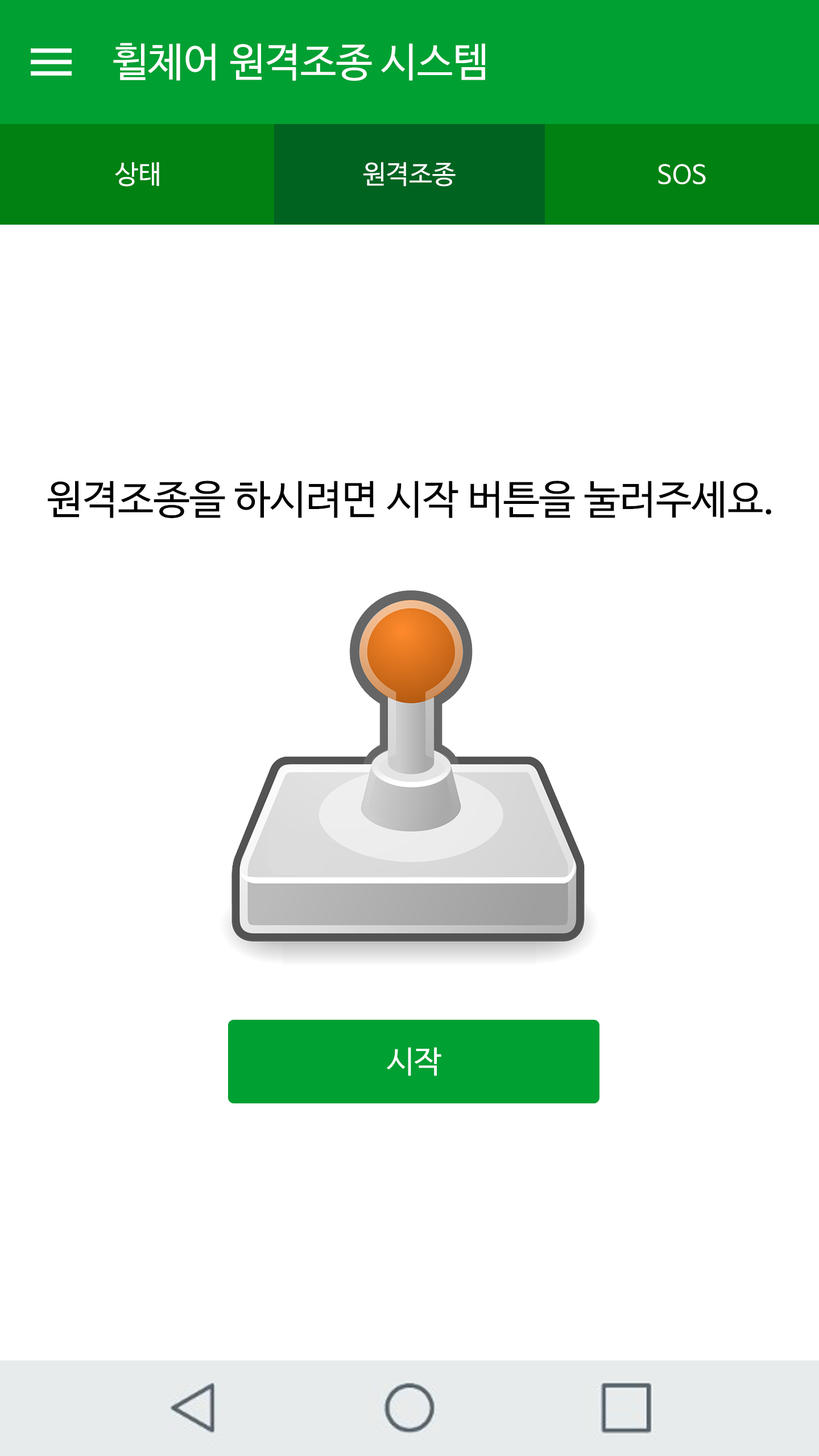
<style>
.page{position:relative;width:819px;height:1456px;background:#ffffff}
.page>*{position:absolute;margin:0}
.t1{font:40.3px "NanumBarunGothicOTF";color:#ffffff}
.t2{font:26.1px "NanumBarunGothicOTF";color:#ffffff}
.t3{font:40.3px "NanumBarunGothicOTF";color:#000000}
.t4{font:30.8px "NanumBarunGothicOTF";color:#ffffff}
</style>
<div class="page">
<p class="t1" style="left:113px;top:43px;width:372px;height:38px">휠체어 원격조종 시스템</p>
<p class="t2" style="left:115px;top:162px;width:44px;height:25px">상태</p>
<p class="t2" style="left:363px;top:162px;width:93px;height:25px">원격조종</p>
<p class="t2" style="left:658px;top:164px;width:48px;height:20px">SOS</p>
<p class="t3" style="left:48px;top:481px;width:723px;height:37px">원격조종을 하시려면 시작 버튼을 눌러주세요.</p>
<p class="t4" style="left:387px;top:1047px;width:54px;height:29px">시작</p>
</div>
